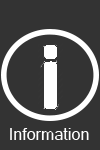
<style>
.page{position:relative;width:100px;height:150px;background:#333333}
.page>*{position:absolute;margin:0}
.t1{font:16.1px "MicrosoftSansSerif";color:#ffffff}
</style>
<div class="page">
<p class="t1" style="left:10px;top:128px;width:79px;height:12px">Information</p>
</div>
